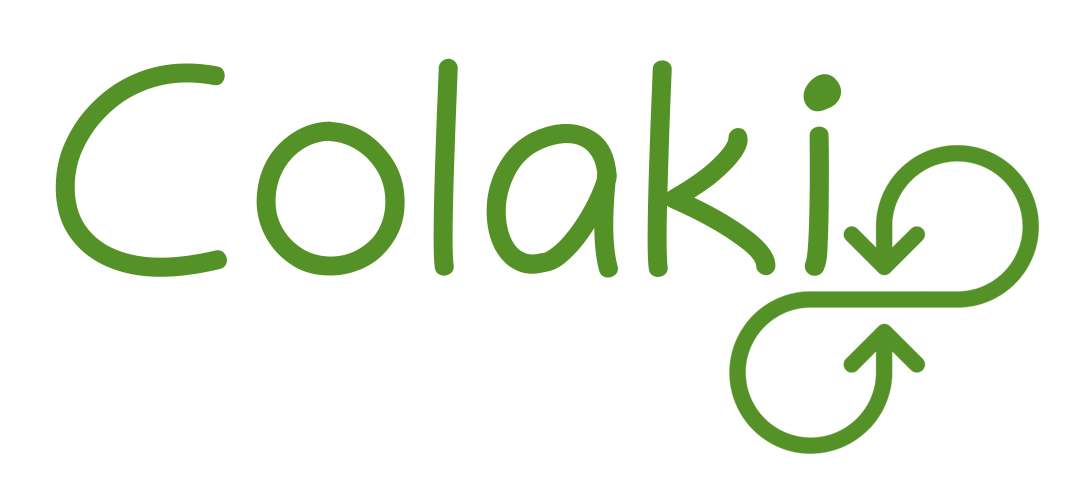
<style>
.page{position:relative;width:1086px;height:489px;background:#ffffff}
.page>*{position:absolute;margin:0}
.t1{font:300px "Chilanka-Regular";color:#549127}
</style>
<div class="page">
<p class="t1" style="left:55px;top:58px;width:786px;height:220px">Colaki</p>
</div>
